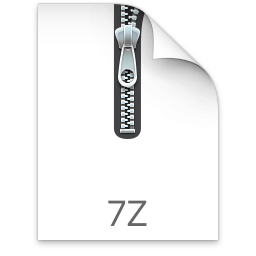
<style>
.page{position:relative;width:256px;height:256px;background:#ffffff}
.page>*{position:absolute;margin:0}
.t1{font:36px "SFProDisplay-Regular";color:#676767}
</style>
<div class="page">
<p class="t1" style="left:108px;top:200px;width:39px;height:26px">7Z</p>
</div>
